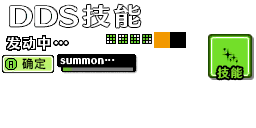
<style>
.page{position:relative;width:256px;height:128px;background:#ffffff}
.page>*{position:absolute;margin:0}
.t1{font:24px "SkipStd-B";letter-spacing:0.12em;color:#ffffff;scale:1.15 1}
.t2{font:13.3px "FZYASHS_ZHONG--GB1-0";letter-spacing:0.12em;color:#ffffff}
.t3{font:12px "PingFangSC-Medium";letter-spacing:0.02em;color:#000000}
.t4{font:12px "HYWenHei-HEW";letter-spacing:0.1em;color:#84d92f}
</style>
<div class="page">
<p class="t1" style="left:82px;top:4px;width:59px;height:24px">技能</p>
<p class="t2" style="left:7px;top:36px;width:43px;height:14px">发动中</p>
<p class="t3" style="left:22px;top:58px;width:24px;height:12px">确定</p>
<p class="t4" style="left:217px;top:67px;width:26px;height:12px">技能</p>
</div>
